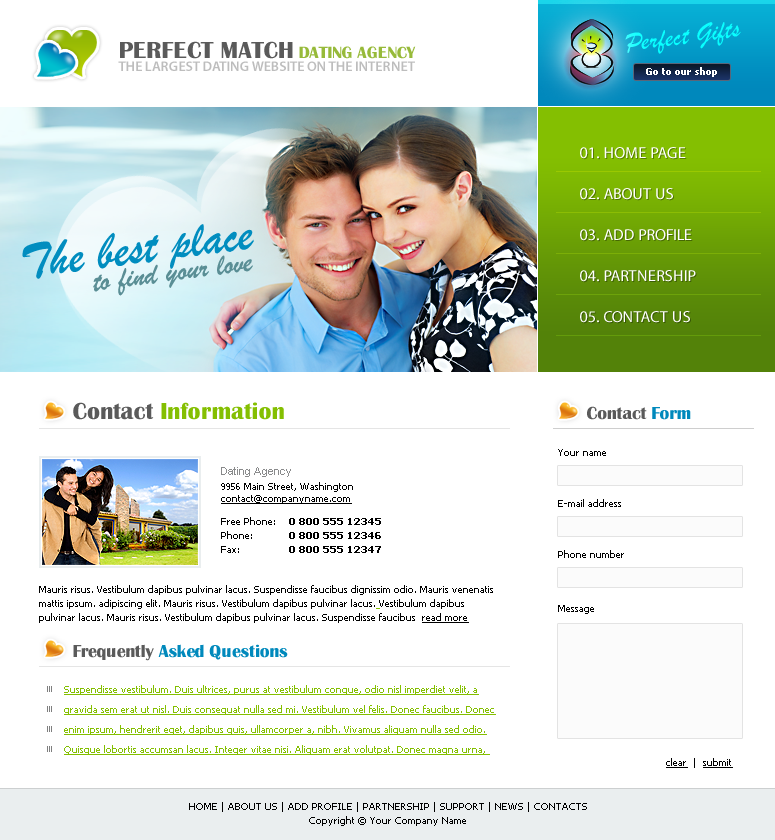
<style>
.page{position:relative;width:775px;height:840px;background:#ffffff}
.page>*{position:absolute;margin:0}
.t1{font:27px "BrushScriptMT";color:#0affff}
.t2{font:24px "BritannicBold";color:#5a5a5a;text-transform:uppercase}
.t3{font:17px "BritannicBold";color:#97ba3a;text-transform:uppercase}
.t4{font:14px "MyriadPro-Semibold";color:#bdbdbd;text-transform:uppercase}
.t5{font:10px "Tahoma-Bold";color:#ffffff}
.t6{font:16px "MyriadPro-Regular";color:#ffffff;text-transform:uppercase}
.t7{font:51px "BrushScriptMT";color:#018dbf}
.t8{font:31px "BrushScriptMT";color:#5a8e95}
.t9{font:24px "BritannicBold";color:#84bf01}
.t10{font:24px "BritannicBold";color:#5a5a5a}
.t11{font:18px "BritannicBold";color:#5a5a5a}
.t12{font:18px "BritannicBold";color:#0089bc}
.t13{font:10px "Tahoma";color:#000000}
.t14{font:11px "ArialMT";color:#898a8b}
.t15{font:10px/12px "Tahoma";color:#000000}
.t16{font:10px/12px "Tahoma";color:#000000;text-decoration:underline}
.t17{font:10px/14px "Tahoma";color:#000000}
.t18{font:10px/14px "Tahoma-Bold";color:#000000}
.t19{font:10px/14px "Tahoma";color:#000000;text-decoration:underline}
.t20{font:10px/20px "Tahoma";color:#84bf01;text-decoration:underline}
.t21{font:10px "Tahoma";color:#000000;text-decoration:underline}
</style>
<div class="page">
<p class="t1" style="left:625px;top:22px;width:116px;height:32px;rotate:-7deg">Perfect Gifts</p>
<p class="t2" style="left:120px;top:41px;width:173px;height:18px">perfect match</p>
<p class="t3" style="left:299px;top:46px;width:117px;height:13px">DATING AGENCY</p>
<p class="t4" style="left:118px;top:61px;width:297px;height:10px">THE LARGEST DATING WEBSITE ON THE INTERNET</p>
<p class="t5" style="left:646px;top:67px;width:71px;height:10px">Go to our shop</p>
<p class="t6" style="left:580px;top:147px;width:106px;height:12px">01. HOME PAGE</p>
<p class="t6" style="left:580px;top:188px;width:93px;height:12px">02. ABOUT US</p>
<p class="t7" style="left:22px;top:224px;width:232px;height:55px;rotate:-7deg">The best place</p>
<p class="t6" style="left:580px;top:229px;width:112px;height:12px">03. ADD PROFILE</p>
<p class="t8" style="left:93px;top:255px;width:160px;height:41px;rotate:-7deg">to find your love</p>
<p class="t6" style="left:580px;top:270px;width:116px;height:12px">04. PARTNERSHIP</p>
<p class="t6" style="left:580px;top:311px;width:110px;height:12px">05. CONTACT US</p>
<p class="t9" style="left:73px;top:402px;width:211px;height:18px"><span class="t10">Contact </span>Information</p>
<p class="t11" style="left:587px;top:406px;width:104px;height:14px">Contact <span class="t12">Form</span></p>
<p class="t13" style="left:558px;top:449px;width:48px;height:7px">Your name</p>
<p class="t14" style="left:221px;top:467px;width:70px;height:10px">Dating Agency</p>
<p class="t15" style="left:221px;top:482px;width:132px;height:22px">9956 Main Street, Washington<br><span class="t16">contact@companyname.com</span></p>
<p class="t13" style="left:558px;top:499px;width:63px;height:8px">E-mail address</p>
<p class="t17" style="left:221px;top:517px;width:54px;height:36px">Free Phone:<br>Phone:<br>Fax:</p>
<p class="t18" style="left:289px;top:518px;width:92px;height:35px;text-align:right">0 800 555 12345<br>0 800 555 12346<br>0 800 555 12347</p>
<p class="t13" style="left:558px;top:550px;width:66px;height:8px">Phone number</p>
<p class="t17" style="left:39px;top:585px;width:454px;height:38px">Mauris risus. Vestibulum dapibus pulvinar lacus. Suspendisse faucibus dignissim odio. Mauris venenatis mattis ipsum. adipiscing elit. Mauris risus. Vestibulum dapibus pulvinar lacus. Vestibulum dapibus pulvinar lacus. Mauris risus. Vestibulum dapibus pulvinar lacus. Suspendisse faucibus  <span class="t19">read more</span></p>
<p class="t13" style="left:558px;top:605px;width:36px;height:9px">Message</p>
<p class="t12" style="left:73px;top:644px;width:215px;height:17px"><span class="t11">Frequently </span>Asked Questions</p>
<p class="t20" style="left:64px;top:685px;width:432px;height:70px">Suspendisse vestibulum. Duis ultrices, purus at vestibulum congue, odio nisl imperdiet velit, a gravida sem erat ut nisl. Duis consequat nulla sed mi. Vestibulum vel felis. Donec faucibus. Donec enim ipsum, hendrerit eget, dapibus quis, ullamcorper a, nibh. Vivamus aliquam nulla sed odio. Quisque lobortis accumsan lacus. Integer vitae nisi. Aliquam erat volutpat. Donec magna urna,</p>
<p class="t21" style="left:666px;top:758px;width:67px;height:10px">clear<span class="t13">  |  </span>submit</p>
<p class="t17" style="left:189px;top:802px;width:398px;height:24px;text-align:center">HOME | ABOUT US | ADD PROFILE | PARTNERSHIP | SUPPORT | NEWS | CONTACTS<br>Copyright © Your Company Name</p>
</div>
